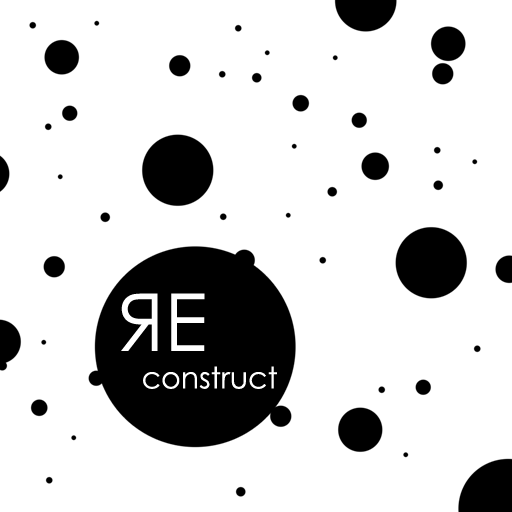
<style>
.page{position:relative;width:512px;height:512px;background:#ffffff}
.page>*{position:absolute;margin:0}
.t1{font:80px "CenturyGothic";color:#ffffff}
.t2{font:30px "CenturyGothic";color:#ffffff}
</style>
<div class="page">
<p class="t1" style="left:121px;top:293px;width:84px;height:58px">ЯE</p>
<p class="t2" style="left:143px;top:366px;width:134px;height:23px">construct</p>
</div>
